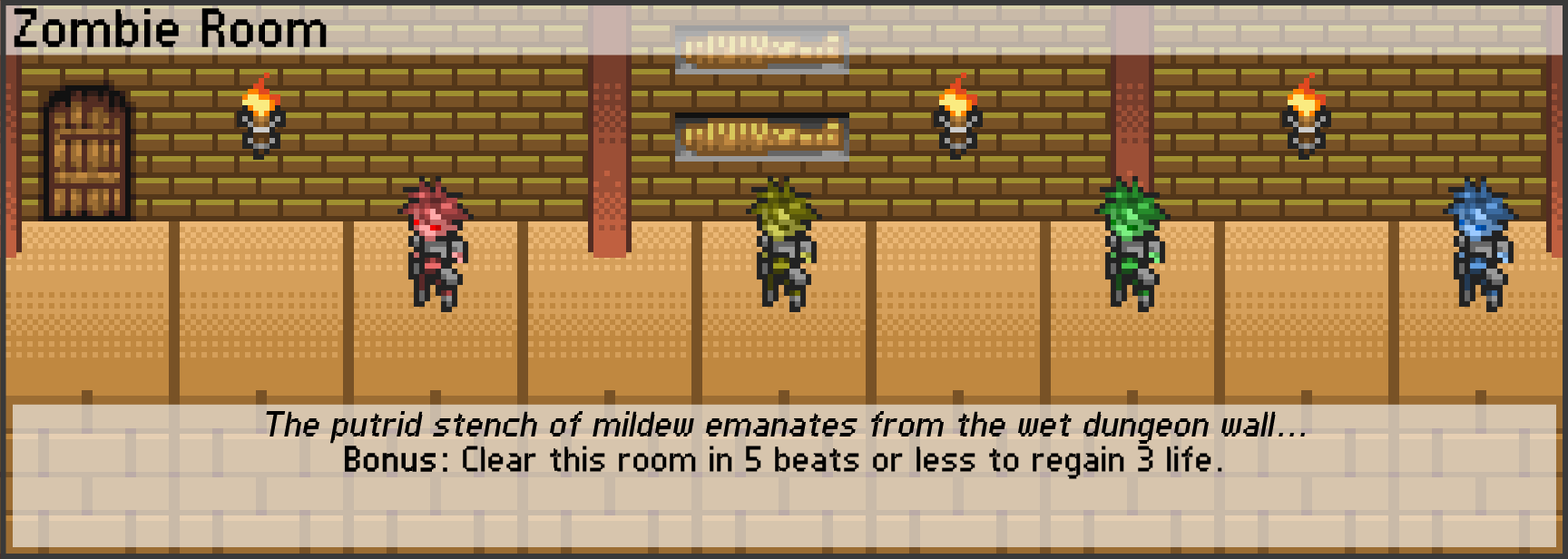
<style>
.page{position:relative;width:1568px;height:559px}
.page>*{position:absolute;margin:0}
.t1{font:43.6px "PFTempestaSevenCondensed";color:#000000;font-weight:bold}
.t2{font:29px "PFTempestaSevenCondensed";color:#000000;font-style:italic}
.t3{font:29px "PFTempestaSevenCondensed";color:#000000;font-weight:bold}
.t4{font:29px "PFTempestaSevenCondensed";color:#000000}
</style>
<div class="page">
<p class="t1" style="left:14px;top:8px;width:313px;height:39px">Zombie Room</p>
<p class="t2" style="left:266px;top:411px;width:1039px;height:68px;text-align:center">The putrid stench of mildew emanates from the wet dungeon wall...<br><span class="t3">Bonus: </span><span class="t4">Clear this room in 5 beats or less to regain 3 life.</span></p>
</div>
